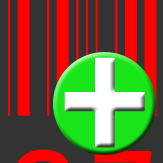
<style>
.page{position:relative;width:163px;height:163px;background:#333333}
.page>*{position:absolute;margin:0}
.t1{font:163px "StencilStd";color:#ffffff}
</style>
<div class="page">
<p class="t1" style="left:64px;top:57px;width:81px;height:91px">+</p>
</div>
